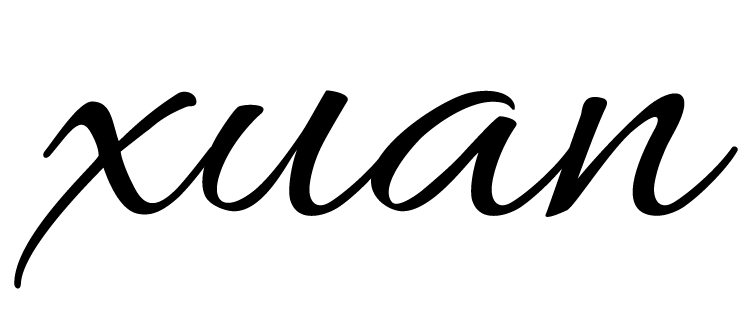
<style>
.page{position:relative;width:750px;height:320px;background:#ffffff}
.page>*{position:absolute;margin:0}
.t1{font:398px "Allura-Regular";color:#000000}
</style>
<div class="page">
<p class="t1" style="left:14px;top:90px;width:724px;height:199px">xuan</p>
</div>
